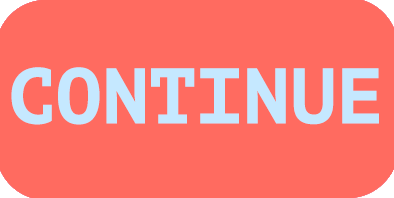
<style>
.page{position:relative;width:394px;height:198px;background:#ff6b60}
.page>*{position:absolute;margin:0}
.t1{font:78.2px "PTMono-Bold";color:#c5e8ff}
</style>
<div class="page">
<p class="t1" style="left:11px;top:67px;width:368px;height:58px">CONTINUE</p>
</div>
